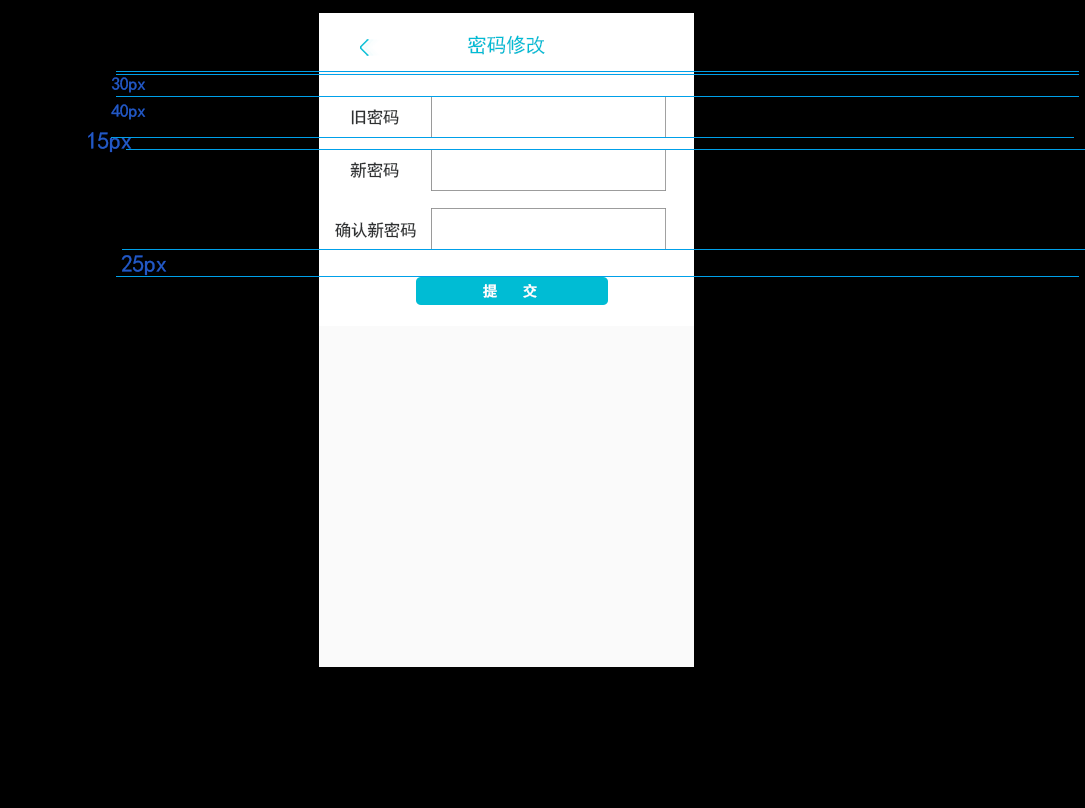
<style>
.page{position:relative;width:1085px;height:808px;background:#000000}
.page>*{position:absolute;margin:0}
.t1{font:20px "SimHei";letter-spacing:-0.02em;color:#00bcd4}
.t2{font:18px "SimHei";letter-spacing:-0.02em;color:#2358c4}
.t3{font:16.7px "SimHei";letter-spacing:-0.02em;color:#2e3031}
.t4{font:24px "SimHei";letter-spacing:-0.02em;color:#2358c4}
.t5{font:14.4px "SimHei";letter-spacing:0.02em;color:#ffffff;font-weight:bold}
</style>
<div class="page">
<p class="t1" style="left:467px;top:35px;width:78px;height:20px">密码修改</p>
<p class="t2" style="left:111px;top:77px;width:35px;height:16px">30px</p>
<p class="t2" style="left:111px;top:104px;width:35px;height:16px">40px</p>
<p class="t3" style="left:351px;top:109px;width:48px;height:16px">旧密码</p>
<p class="t4" style="left:88px;top:132px;width:44px;height:21px">15px</p>
<p class="t3" style="left:350px;top:162px;width:49px;height:16px">新密码</p>
<p class="t3" style="left:335px;top:222px;width:81px;height:16px">确认新密码</p>
<p class="t4" style="left:121px;top:255px;width:46px;height:21px">25px</p>
<p class="t5" style="left:483px;top:284px;width:54px;height:14px">提  交</p>
</div>
